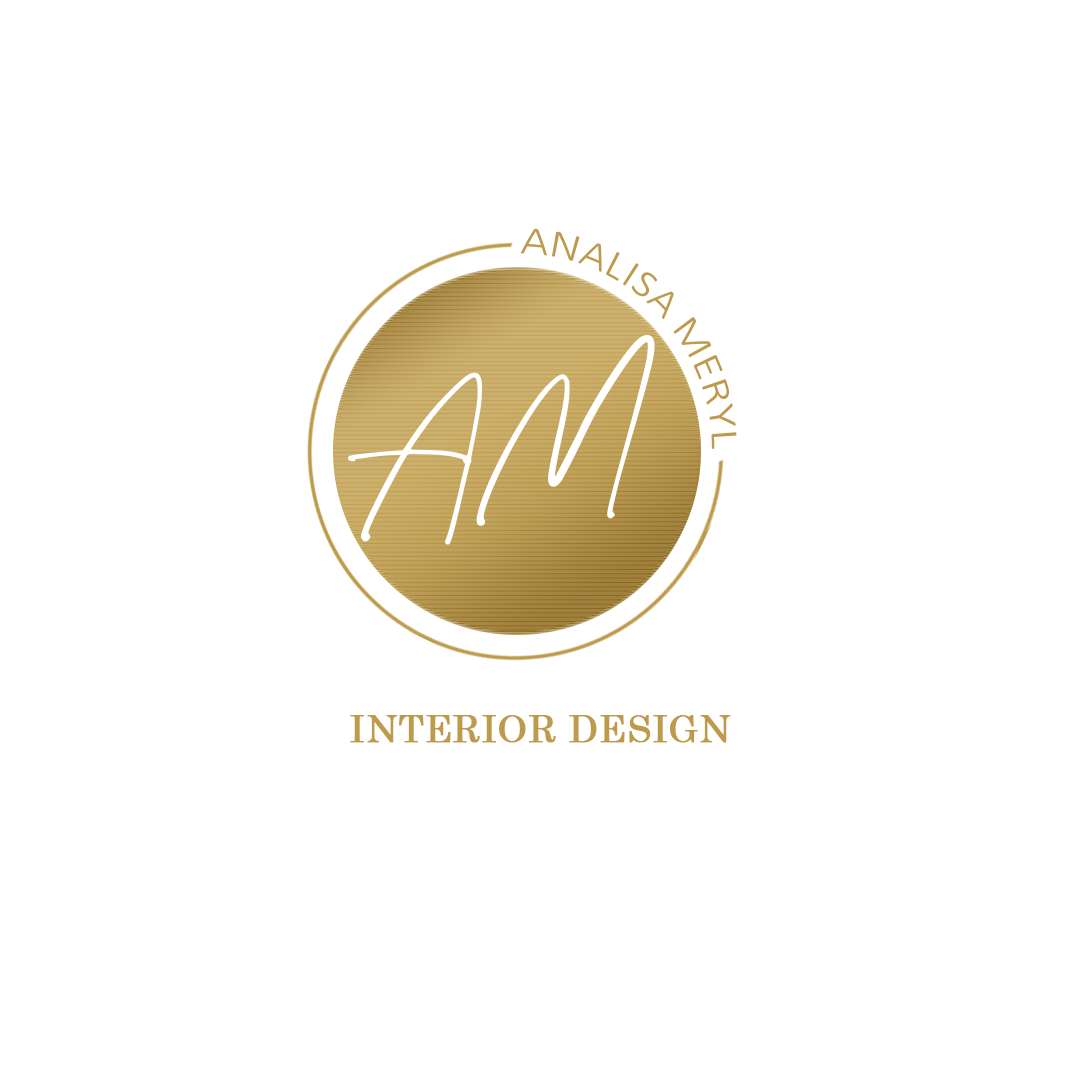
<style>
.page{position:relative;width:1080px;height:1080px;background:#ffffff}
.page>*{position:absolute;margin:0}
.t1{font:338px "Wonderful-Melanesia-Signature";letter-spacing:-0.07em;color:#ffffff;text-transform:uppercase}
.t2{font:38px "CenturySchoolbook";color:#bd9b4a;text-transform:uppercase;font-weight:bold}
</style>
<div class="page">
<p class="t1" style="left:348px;top:335px;width:307px;height:210px;rotate:1deg">Am</p>
<p class="t2" style="left:350px;top:715px;width:381px;height:28px">interior Design</p>
</div>
